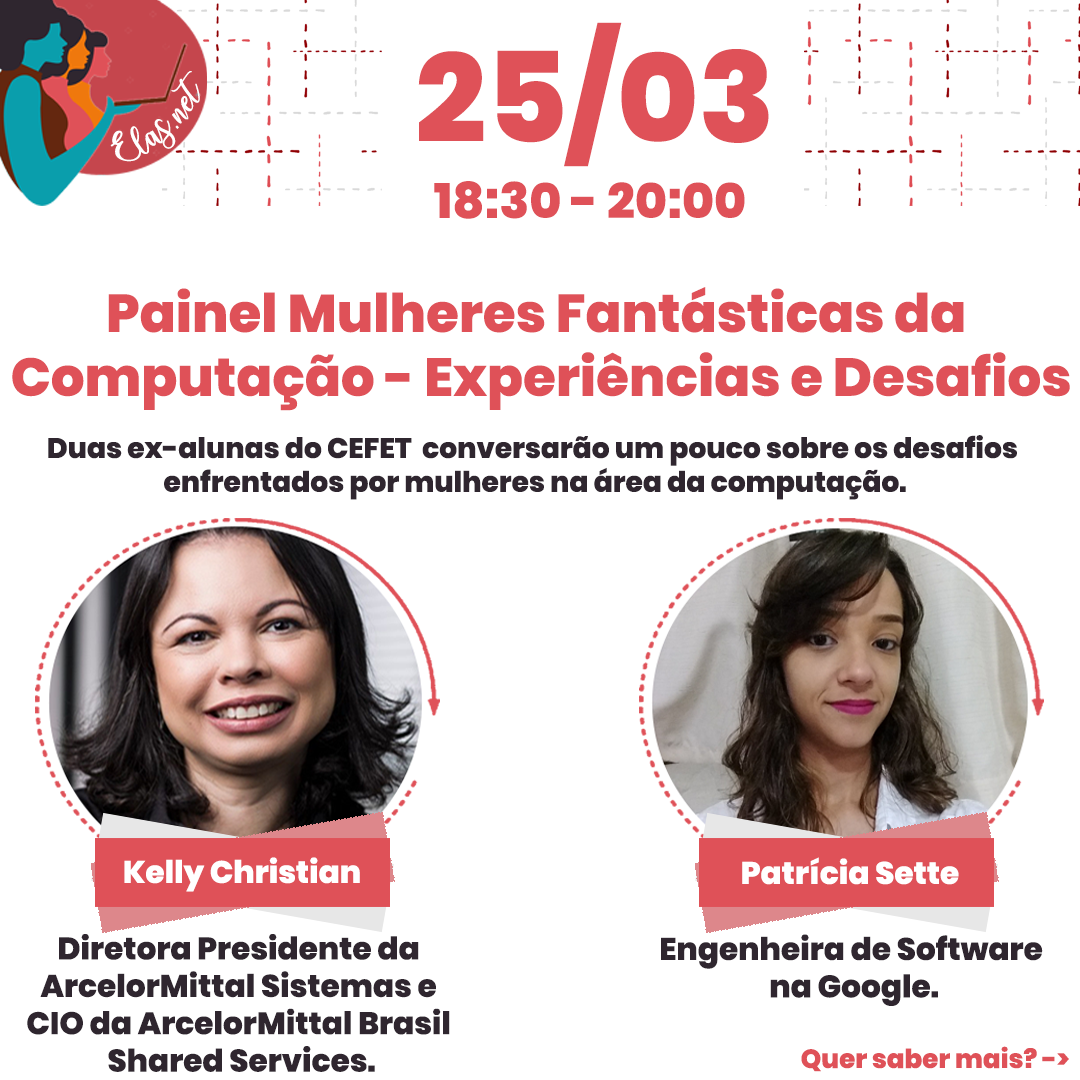
<style>
.page{position:relative;width:1080px;height:1080px;background:#ffffff}
.page>*{position:absolute;margin:0}
.t1{font:125.1px "Poppins-ExtraBold";color:#df5158}
.t2{font:25.7px "charlinda-Regular";color:#ffffff;scale:1.18 1}
.t3{font:49.1px "Poppins-ExtraBold";color:#df5158}
.t4{font:53.1px "Poppins-ExtraBold";color:#df5158}
.t5{font:28.1px "Poppins-ExtraBold";color:#2f262f}
.t6{font:31.1px "Poppins-ExtraBold";color:#ffffff}
.t7{font:31.1px "Poppins-ExtraBold";color:#2f262f}
.t8{font:26.1px "Poppins-ExtraBold";color:#df5158}
</style>
<div class="page">
<p class="t1" style="left:418px;top:22px;width:351px;height:145px">25/03</p>
<p class="t2" style="left:110px;top:71px;width:90px;height:91px;rotate:-43deg">Elas.net</p>
<p class="t3" style="left:434px;top:181px;width:311px;height:38px">18:30 - 20:00</p>
<p class="t4" style="left:12px;top:287px;width:1058px;height:124px;text-align:center">Painel Mulheres Fantásticas da <br>Computação - Experiências e Desafios</p>
<p class="t5" style="left:48px;top:435px;width:969px;height:65px;text-align:center">Duas ex-alunas do CEFET  conversarão um pouco sobre os desafios <br>enfrentados por mulheres na área da computação.</p>
<p class="t6" style="left:124px;top:857px;width:236px;height:35px">Kelly Christian</p>
<p class="t6" style="left:742px;top:857px;width:217px;height:28px">Patrícia Sette</p>
<p class="t7" style="left:27px;top:934px;width:423px;height:138px;text-align:center">Diretora Presidente da <br>ArcelorMittal Sistemas e <br>CIO da ArcelorMittal Brasil <br>Shared Services.</p>
<p class="t7" style="left:661px;top:934px;width:382px;height:72px;text-align:center">Engenheira de Software <br>na Google.</p>
<p class="t8" style="left:801px;top:1046px;width:268px;height:26px">Quer saber mais? -&gt;</p>
</div>
